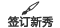
<style>
.page{position:relative;width:60px;height:28px;background:#ffffff}
.page>*{position:absolute;margin:0}
.t1{font:11px "MicrosoftYaHei";letter-spacing:0.01em;color:#333333;font-weight:bold}
</style>
<div class="page">
<p class="t1" style="left:7px;top:16px;width:47px;height:12px">签订新秀</p>
</div>
